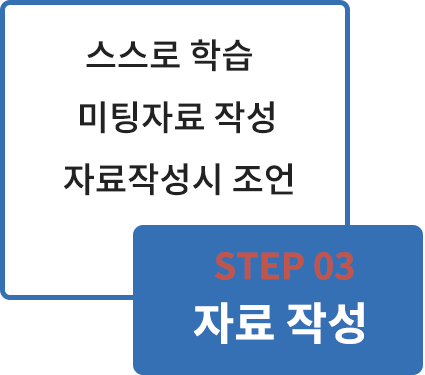
<style>
.page{position:relative;width:425px;height:375px;background:#ffffff}
.page>*{position:absolute;margin:0}
.t1{font:35px "NotoSansCJKkr-Medium";color:#222222}
.t2{font:36px "NotoSansCJKkr-Bold";color:#c1554b}
.t3{font:45px "NotoSansCJKkr-Bold";color:#ffffff}
</style>
<div class="page">
<p class="t1" style="left:86px;top:39px;width:166px;height:33px">스스로 학습</p>
<p class="t1" style="left:80px;top:101px;width:194px;height:33px">미팅자료 작성</p>
<p class="t1" style="left:63px;top:163px;width:230px;height:33px">자료작성시 조언</p>
<p class="t2" style="left:215px;top:252px;width:139px;height:28px">STEP 03</p>
<p class="t3" style="left:193px;top:302px;width:171px;height:42px">자료 작성</p>
</div>
